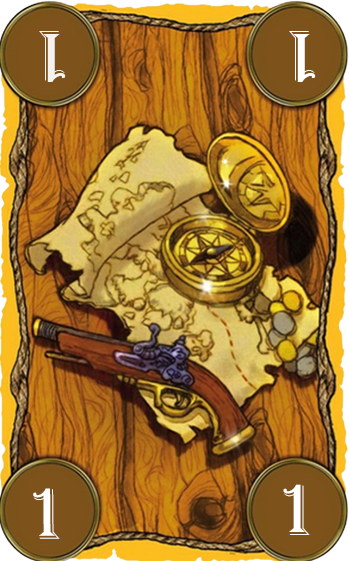
<style>
.page{position:relative;width:349px;height:561px}
.page>*{position:absolute;margin:0}
.t1{font:76.6px "Algerian";color:#ffffff}
</style>
<div class="page">
<p class="t1" style="left:39px;top:31px;width:27px;height:51px;rotate:180deg;opacity:0.9">1</p>
<p class="t1" style="left:289px;top:31px;width:27px;height:51px;rotate:180deg">1</p>
<p class="t1" style="left:283px;top:484px;width:27px;height:51px">1</p>
<p class="t1" style="left:33px;top:488px;width:27px;height:51px">1</p>
</div>
